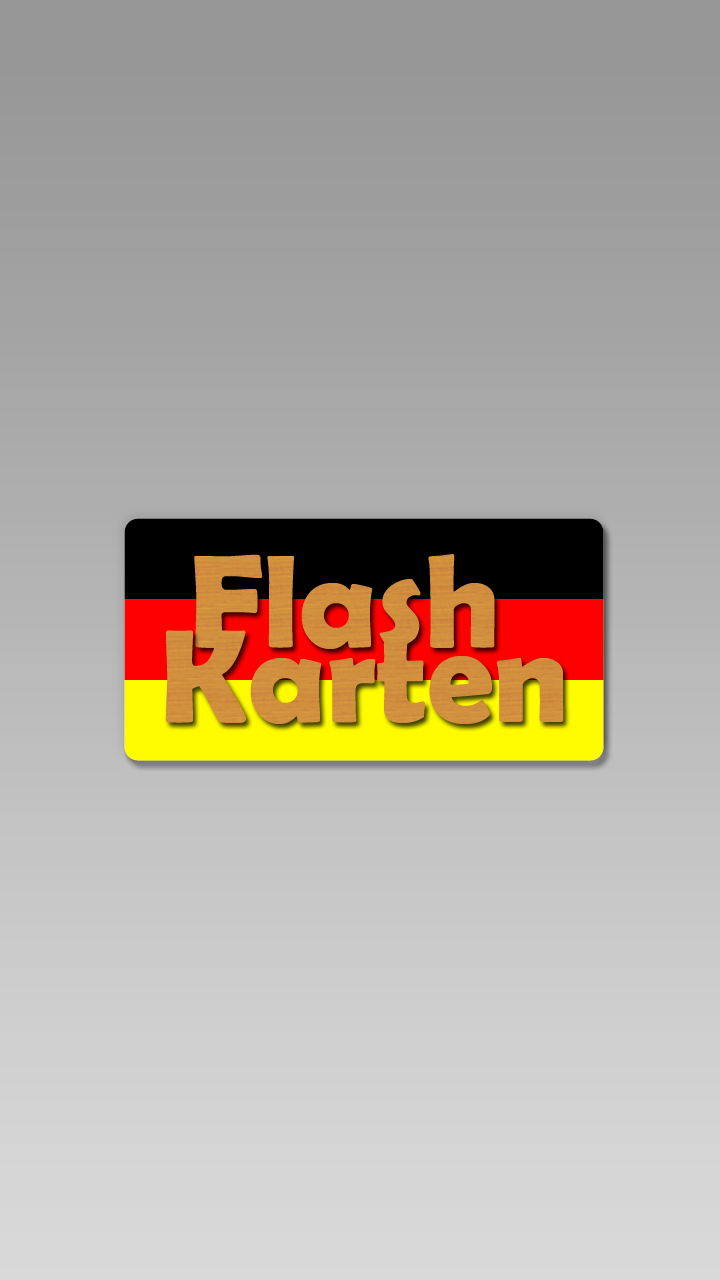
<style>
.page{position:relative;width:720px;height:1280px}
.page>*{position:absolute;margin:0}
.t1{font:132.8px "BerlinSansFBDemi-Bold";color:#d18e3e}
</style>
<div class="page">
<p class="t1" style="left:194px;top:554px;width:301px;height:95px">Flash</p>
<p class="t1" style="left:165px;top:630px;width:399px;height:94px">Karten</p>
</div>
